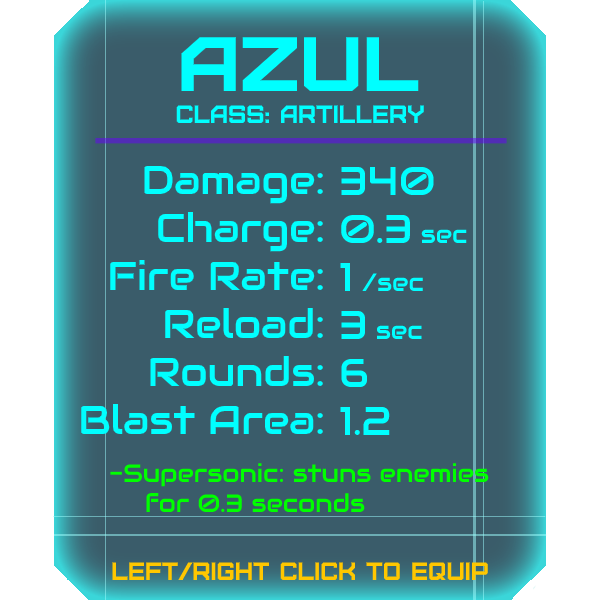
<style>
.page{position:relative;width:600px;height:600px;background:#3a5c6a}
.page>*{position:absolute;margin:0}
.t1{font:76.8px "Furore";color:#00ffff;scale:1.13 1}
.t2{font:25px "Furore";color:#00ffff}
.t3{font:40px "Audiowide-Regular";color:#00ffff}
.t4{font:25px "Audiowide-Regular";color:#00ffff}
.t5{font:25px "Audiowide-Regular";color:#00ff00}
.t6{font:25px "Furore";color:#ffc700}
</style>
<div class="page">
<p class="t1" style="left:181px;top:37px;width:238px;height:54px">Azul</p>
<p class="t2" style="left:176px;top:105px;width:248px;height:18px">Class: artillery</p>
<p class="t3" style="left:81px;top:165px;width:242px;height:269px;text-align:right">Damage:<br>Charge:<br>Fire Rate:<br>Reload:<br>Rounds:<br>Blast Area:</p>
<p class="t3" style="left:340px;top:166px;width:127px;height:269px">340<br>0.3 <span class="t4">sec<br></span>1 <span class="t4">/sec<br></span>3 <span class="t4">sec<br></span>6<br>1.2</p>
<p class="t5" style="left:110px;top:463px;width:379px;height:49px">-Supersonic: stuns enemies<br> for 0.3 seconds</p>
<p class="t6" style="left:112px;top:562px;width:376px;height:18px">left/right click to equip</p>
</div>
